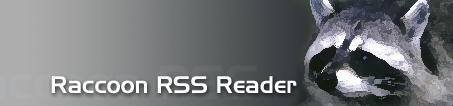
<style>
.page{position:relative;width:453px;height:106px}
.page>*{position:absolute;margin:0}
.t1{font:24px "Slicker";color:#ffffff}
</style>
<div class="page">
<p class="t1" style="left:51px;top:76px;width:246px;height:18px">Raccoon RSS Reader</p>
</div>
